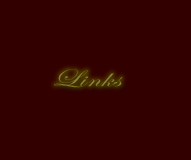
<style>
.page{position:relative;width:191px;height:160px;background:#330000}
.page>*{position:absolute;margin:0}
.t1{font:25.2px "EdwardianScriptITC";letter-spacing:0.025em;color:#838330;scale:1.43 1}
</style>
<div class="page">
<p class="t1" style="left:54px;top:69px;width:69px;height:19px">Links</p>
</div>
